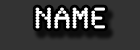
<style>
.page{position:relative;width:140px;height:50px;background:#333333}
.page>*{position:absolute;margin:0}
.t1{font:30px "SynchroLET";color:#ffffff}
</style>
<div class="page">
<p class="t1" style="left:35px;top:7px;width:70px;height:22px">NAME</p>
</div>
